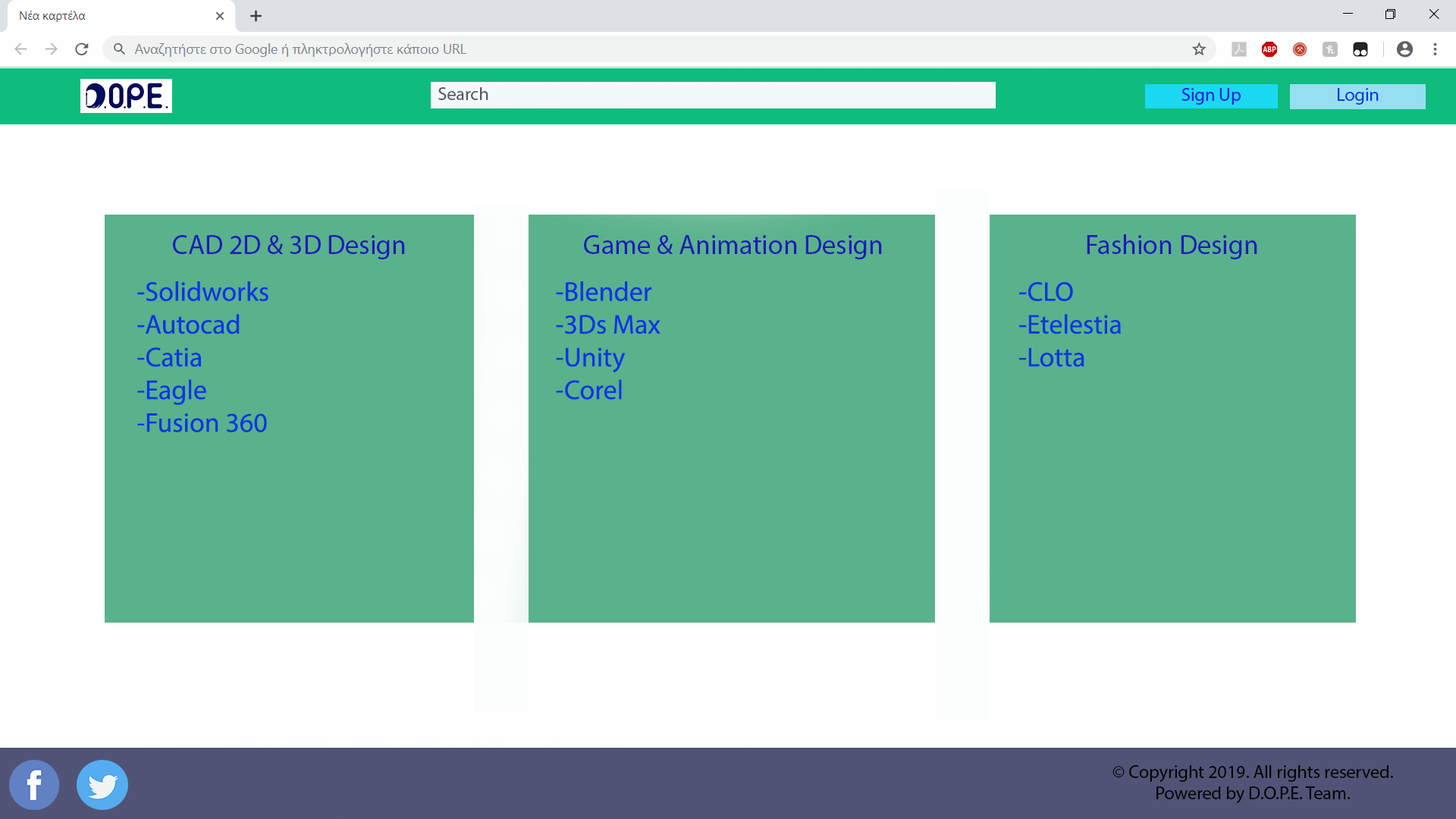
<style>
.page{position:relative;width:1456px;height:819px;background:#59b28b}
.page>*{position:absolute;margin:0}
.t1{font:18.2px "MyriadPro-Regular";color:#57575d}
.t2{font:18.2px "MyriadPro-Regular";color:#0e36e2}
.t3{font:27.3px "MyriadPro-Regular";color:#1f1bb8}
.t4{font:27.3px "MyriadPro-Regular";color:#0e36e2}
.t5{font:18.2px "MyriadPro-Regular";color:#050505}
</style>
<div class="page">
<p class="t1" style="left:438px;top:87px;width:50px;height:13px">Search</p>
<p class="t2" style="left:1338px;top:88px;width:41px;height:17px">Login</p>
<p class="t3" style="left:173px;top:235px;width:232px;height:24px">CAD 2D &amp; 3D Design</p>
<p class="t3" style="left:584px;top:235px;width:298px;height:24px">Game &amp; Animation Design</p>
<p class="t3" style="left:1087px;top:234px;width:170px;height:25px">Fashion Design</p>
<p class="t4" style="left:137px;top:281px;width:131px;height:151px">-Solidworks<br>-Autocad<br>-Catia<br>-Eagle<br>-Fusion 360</p>
<p class="t4" style="left:556px;top:281px;width:104px;height:119px">-Blender<br>-3Ds Max<br>-Unity<br>-Corel</p>
<p class="t4" style="left:1019px;top:281px;width:102px;height:86px">-CLO<br>-Etelestia<br>-Lotta</p>
<p class="t5" style="left:1112px;top:765px;width:281px;height:38px;text-align:center">© Copyright 2019. All rights reserved. Powered by D.O.P.E. Team.</p>
</div>
